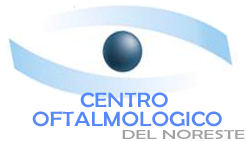
<style>
.page{position:relative;width:247px;height:141px;background:#ffffff}
.page>*{position:absolute;margin:0}
.t1{font:20.6px/18.7px "BerlinSansFB-Reg";color:#5988fb;scale:1.16 1}
.t2{font:20.6px "BerlinSansFB-Reg";color:#5988fb;scale:1.16 1}
.t3{font:13px "BerlinSansFB-Reg";color:#a0a1a1;scale:1.57 1}
</style>
<div class="page">
<p class="t1" style="left:32px;top:92px;width:190px;height:35px"><span class="t2">        </span>CENTRO<br>OFTALMOLOGICO</p>
<p class="t3" style="left:122px;top:129px;width:123px;height:10px">DEL NORESTE</p>
</div>
